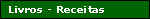
<style>
.page{position:relative;width:150px;height:19px;background:#006401}
.page>*{position:absolute;margin:0}
.t1{font:10px "Verdana-Bold";letter-spacing:0.025em;color:#ffffff}
</style>
<div class="page">
<p class="t1" style="left:9px;top:6px;width:95px;height:7px">Livros - Receitas</p>
</div>
